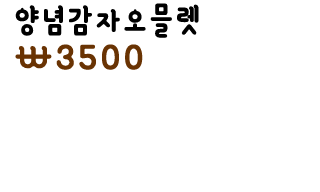
<style>
.page{position:relative;width:320px;height:192px;background:#ffffff}
.page>*{position:absolute;margin:0}
.t1{font:38px "YanoljaYacheB";letter-spacing:0.1em;color:#000000}
.t2{font:43px "YanoljaYacheB";letter-spacing:0.1em;color:#693303}
</style>
<div class="page">
<p class="t1" style="left:15px;top:3px;width:184px;height:35px">양념감자오믈렛</p>
<p class="t2" style="left:15px;top:44px;width:128px;height:26px">\3500</p>
</div>
